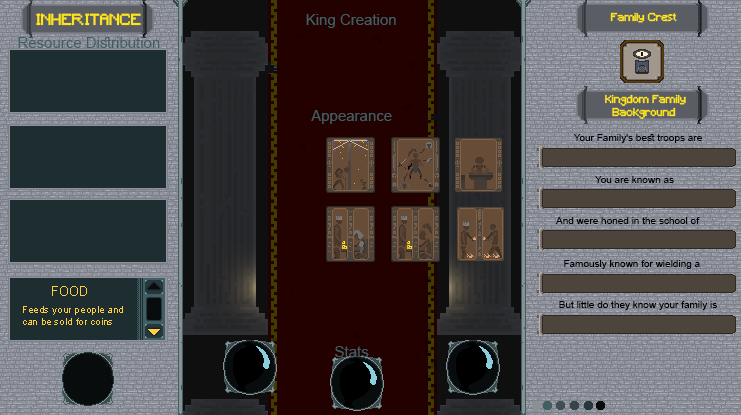
<style>
.page{position:relative;width:741px;height:415px}
.page>*{position:absolute;margin:0}
.t1{font:15px "Minecraft";color:#ffe614}
.t2{font:15px "ArialMT";color:#415e63}
.t3{font:10.8px "Minecraft";color:#ffe614}
.t4{font:10px "ArialMT";color:#000000}
.t5{font:13px "ArialMT";color:#ffce40}
.t6{font:10px "ArialMT";color:#ffce40}
</style>
<div class="page">
<p class="t1" style="left:36px;top:13px;width:105px;height:13px">INHERITANCE</p>
<p class="t2" style="left:306px;top:14px;width:90px;height:14px">King Creation</p>
<p class="t3" style="left:610px;top:12px;width:67px;height:11px">Family Crest</p>
<p class="t2" style="left:18px;top:37px;width:142px;height:11px">Resource Distribution</p>
<p class="t3" style="left:605px;top:94px;width:81px;height:25px;text-align:center">Kingdom Family <br>Background</p>
<p class="t2" style="left:311px;top:110px;width:81px;height:14px">Appearance</p>
<p class="t4" style="left:573px;top:134px;width:129px;height:9px">Your Family's best troops are</p>
<p class="t4" style="left:595px;top:176px;width:79px;height:7px">You are known as</p>
<p class="t4" style="left:555px;top:217px;width:145px;height:7px">And were honed in the school of</p>
<p class="t4" style="left:564px;top:260px;width:136px;height:9px">Famously known for wielding a</p>
<p class="t5" style="left:52px;top:286px;width:35px;height:10px">FOOD</p>
<p class="t4" style="left:559px;top:301px;width:158px;height:9px">But little do they know your family is</p>
<p class="t6" style="left:23px;top:306px;width:100px;height:19px;text-align:right">Feeds your people and<br>can be sold for coins</p>
<p class="t2" style="left:335px;top:346px;width:34px;height:11px">Stats</p>
</div>
